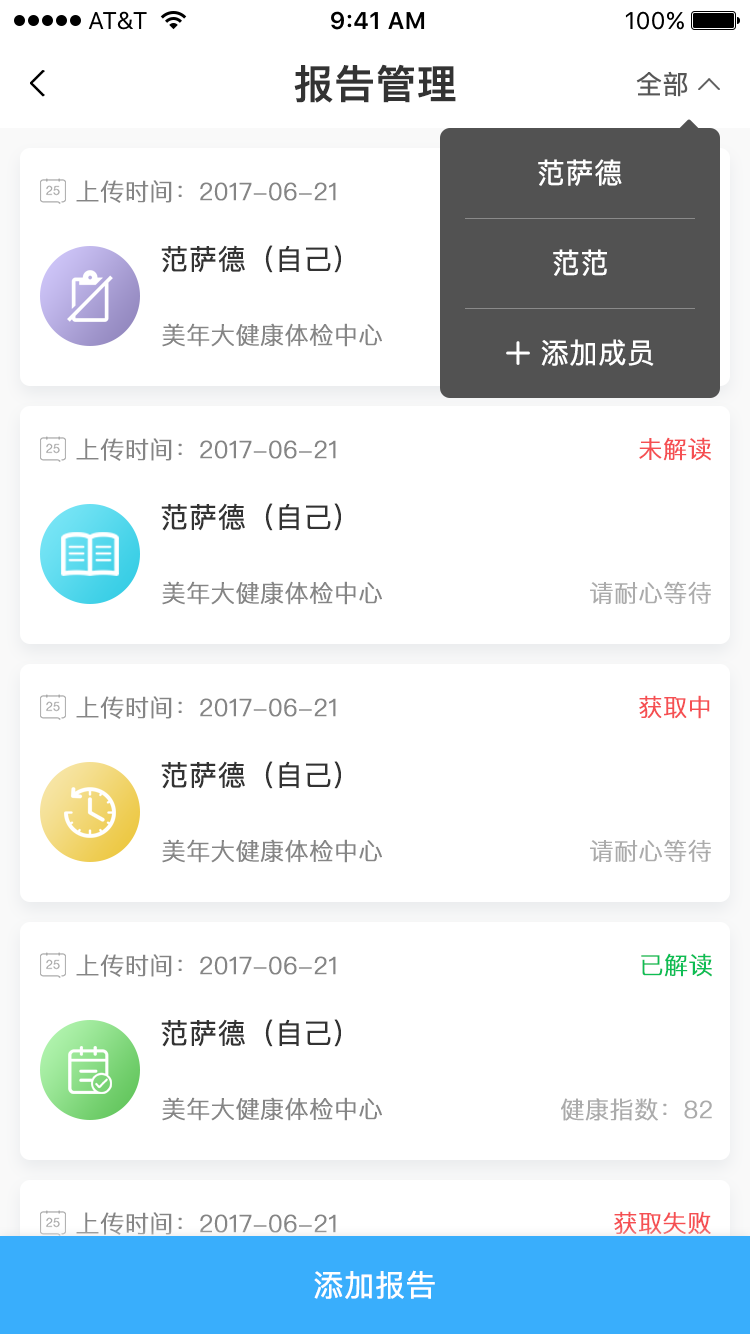
<style>
.page{position:relative;width:750px;height:1334px;background:#ffffff}
.page>*{position:absolute;margin:0}
.t1{font:40px "PingFangSC-Medium";color:#333333;font-weight:bold}
.t2{font:26px "PingFangSC-Regular";color:#575757;font-weight:bold}
.t3{font:28px "PingFangSC-Regular";color:#ffffff;font-weight:bold}
.t4{font:24px "PingFangSC-Light";color:#858585;font-weight:bold}
.t5{font:28px "PingFangSC-Regular";color:#333333;font-weight:bold}
.t6{font:24px "PingFangSC-Light";color:#f54f52;font-weight:bold}
.t7{font:24px "PingFangSC-Light";color:#ababab;font-weight:bold}
.t8{font:24px "PingFangSC-Light";color:#0dbd54;font-weight:bold}
.t9{font:30px "PingFangSC-Regular";color:#ffffff;font-weight:bold}
</style>
<div class="page">
<p class="t1" style="left:294px;top:64px;width:162px;height:39px">报告管理</p>
<p class="t2" style="left:636px;top:71px;width:52px;height:26px">全部</p>
<p class="t3" style="left:538px;top:159px;width:84px;height:27px">范萨德</p>
<p class="t4" style="left:76px;top:180px;width:260px;height:23px">上传时间：2017-06-21</p>
<p class="t5" style="left:161px;top:245px;width:180px;height:28px">范萨德（自己）</p>
<p class="t3" style="left:553px;top:249px;width:54px;height:27px">范范</p>
<p class="t4" style="left:162px;top:323px;width:220px;height:24px">美年大健康体检中心</p>
<p class="t3" style="left:541px;top:339px;width:113px;height:27px">添加成员</p>
<p class="t4" style="left:76px;top:438px;width:260px;height:23px">上传时间：2017-06-21</p>
<p class="t6" style="left:639px;top:437px;width:72px;height:24px">未解读</p>
<p class="t5" style="left:161px;top:503px;width:180px;height:28px">范萨德（自己）</p>
<p class="t4" style="left:162px;top:581px;width:220px;height:24px">美年大健康体检中心</p>
<p class="t7" style="left:590px;top:581px;width:121px;height:23px">请耐心等待</p>
<p class="t4" style="left:76px;top:696px;width:260px;height:23px">上传时间：2017-06-21</p>
<p class="t6" style="left:639px;top:695px;width:71px;height:24px">获取中</p>
<p class="t5" style="left:161px;top:761px;width:180px;height:28px">范萨德（自己）</p>
<p class="t4" style="left:162px;top:839px;width:220px;height:24px">美年大健康体检中心</p>
<p class="t7" style="left:590px;top:839px;width:121px;height:23px">请耐心等待</p>
<p class="t8" style="left:641px;top:953px;width:71px;height:24px">已解读</p>
<p class="t4" style="left:76px;top:954px;width:260px;height:23px">上传时间：2017-06-21</p>
<p class="t5" style="left:161px;top:1019px;width:180px;height:28px">范萨德（自己）</p>
<p class="t4" style="left:162px;top:1097px;width:220px;height:24px">美年大健康体检中心</p>
<p class="t7" style="left:561px;top:1098px;width:151px;height:23px">健康指数：82</p>
<p class="t4" style="left:76px;top:1212px;width:260px;height:23px">上传时间：2017-06-21</p>
<p class="t6" style="left:614px;top:1211px;width:97px;height:24px">获取失败</p>
<p class="t9" style="left:314px;top:1270px;width:121px;height:29px">添加报告</p>
</div>
